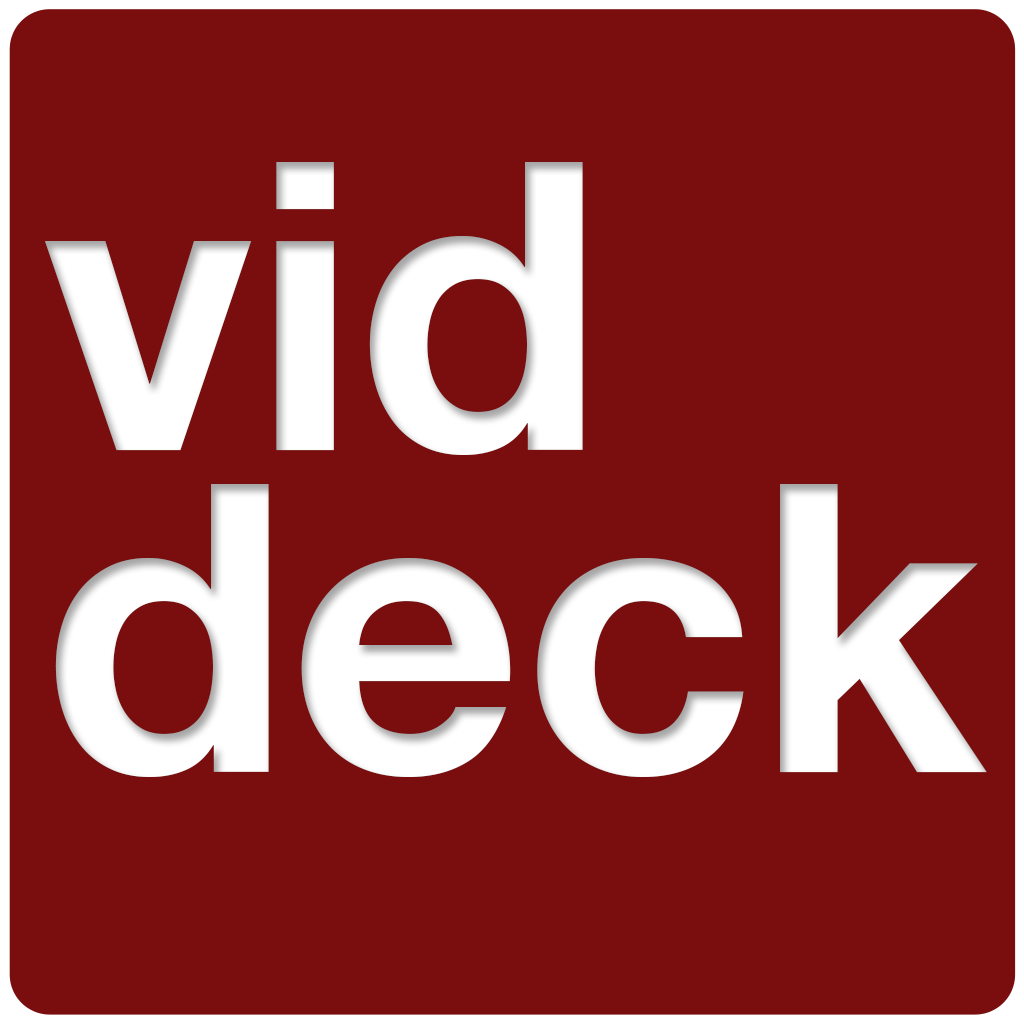
<style>
.page{position:relative;width:1024px;height:1024px;background:#7a0e0e}
.page>*{position:absolute;margin:0}
.t1{font:404px/322px "HelveticaNeue-Bold";color:#ffffff}
</style>
<div class="page">
<p class="t1" style="left:45px;top:162px;width:942px;height:615px">vid<br>deck</p>
</div>
